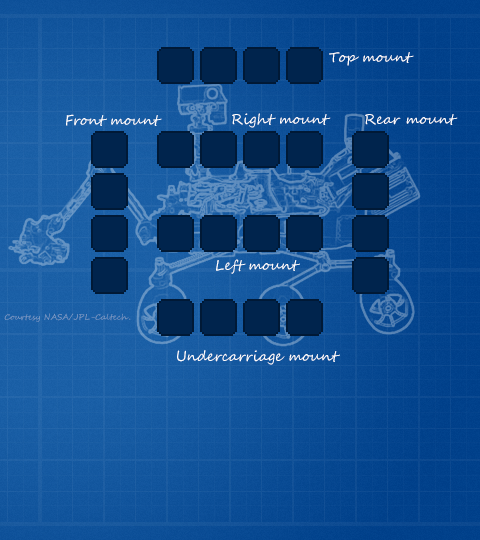
<style>
.page{position:relative;width:480px;height:540px}
.page>*{position:absolute;margin:0}
.t1{font:14px "SegoeScript";color:#ffffff}
.t2{font:8px "SegoeScript"}
</style>
<div class="page">
<p class="t1" style="left:329px;top:52px;width:85px;height:14px">Top mount</p>
<p class="t1" style="left:232px;top:113px;width:99px;height:15px">Right mount</p>
<p class="t1" style="left:66px;top:114px;width:96px;height:12px">Front mount</p>
<p class="t1" style="left:365px;top:114px;width:93px;height:11px">Rear mount</p>
<p class="t1" style="left:216px;top:259px;width:84px;height:15px">Left mount</p>
<p class="t2" style="left:4px;top:313px;width:127px;height:9px">Courtesy NASA/JPL-Caltech.</p>
<p class="t1" style="left:177px;top:350px;width:163px;height:15px">Undercarriage mount</p>
</div>
